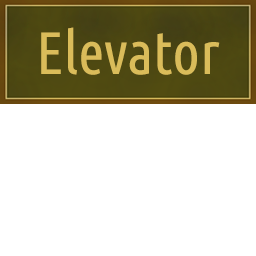
<style>
.page{position:relative;width:256px;height:256px;background:#ffffff}
.page>*{position:absolute;margin:0}
.t1{font:60px "UbuntuCondensed-Regular";color:#dabc5a}
</style>
<div class="page">
<p class="t1" style="left:41px;top:27px;width:179px;height:48px">Elevator</p>
</div>
